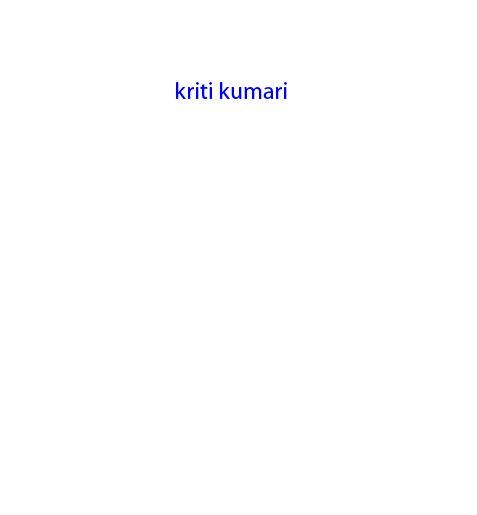
<style>
.page{position:relative;width:477px;height:515px;background:#ffffff}
.page>*{position:absolute;margin:0}
.t1{font:24px "MyriadPro-Regular";color:#0000ff}
</style>
<div class="page">
<p class="t1" style="left:176px;top:82px;width:111px;height:17px">kriti kumari</p>
</div>
